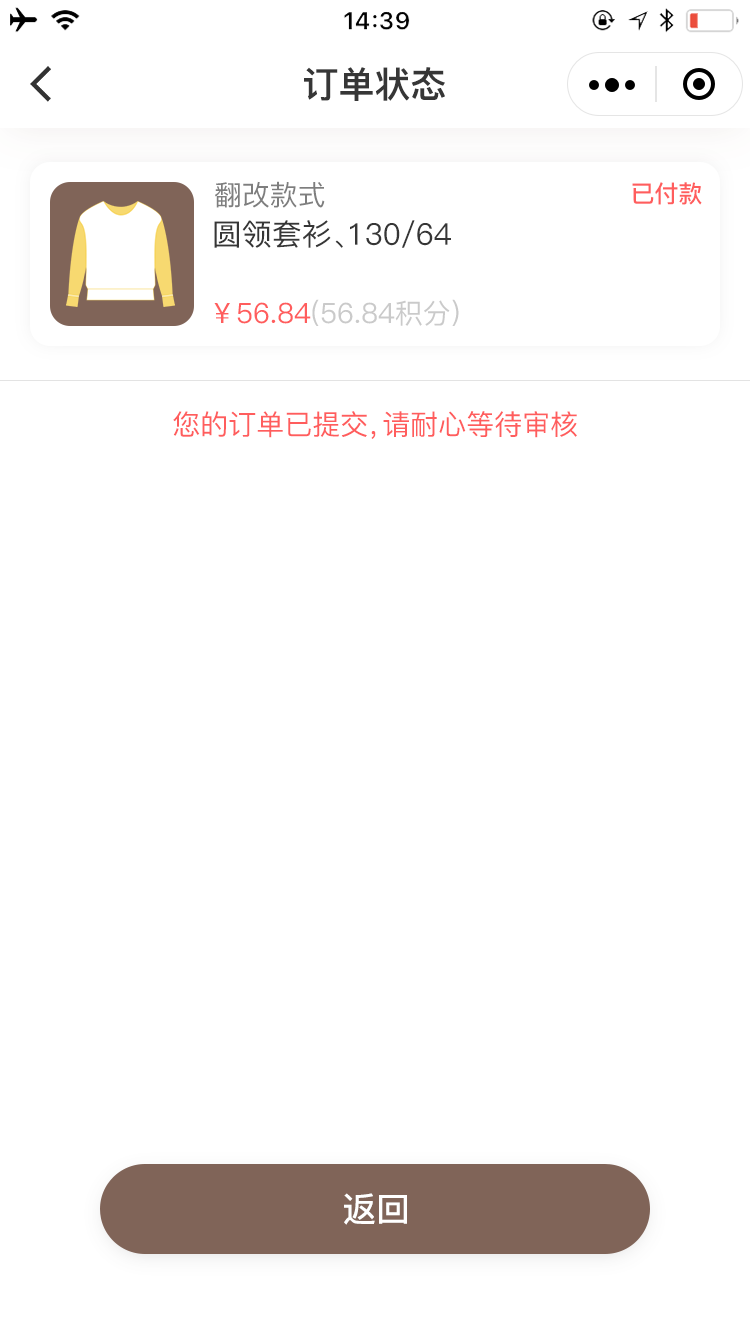
<style>
.page{position:relative;width:750px;height:1334px;background:#ffffff}
.page>*{position:absolute;margin:0}
.t1{font:36px "PingFang-SC-Heavy";color:#363636}
.t2{font:28px "PingFang-SC-Medium";color:#7e7e7e}
.t3{font:24px "PingFang-SC-Bold";color:#ff5d5d}
.t4{font:30px "PingFang-SC-Medium";color:#363636}
.t5{font:28px "PingFang-SC-Medium";color:#cacaca}
.t6{font:28px "PingFang-SC-Medium";color:#ff5d5d}
.t7{font:34px "PingFang-SC-Bold";color:#ffffff}
</style>
<div class="page">
<p class="t1" style="left:304px;top:67px;width:141px;height:34px">订单状态</p>
<p class="t2" style="left:215px;top:181px;width:110px;height:27px">翻改款式</p>
<p class="t3" style="left:632px;top:182px;width:70px;height:23px">已付款</p>
<p class="t4" style="left:214px;top:220px;width:237px;height:28px">圆领套衫、130/64</p>
<p class="t5" style="left:214px;top:299px;width:245px;height:27px"><span class="t6">￥56.84</span>(56.84积分)</p>
<p class="t6" style="left:173px;top:411px;width:404px;height:28px">您的订单已提交，请耐心等待审核</p>
<p class="t7" style="left:344px;top:1193px;width:63px;height:32px">返回</p>
</div>
